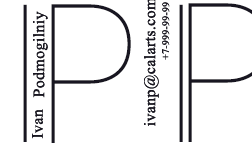
<style>
.page{position:relative;width:252px;height:144px;background:#ffffff}
.page>*{position:absolute;margin:0}
.t1{font:190px "ISOCT";letter-spacing:0.02em;color:#181621}
.t2{font:10px "TimesNewRomanPSMT";letter-spacing:0.02em;color:#181621}
.t3{font:16px "TimesNewRomanPSMT";letter-spacing:0.02em;color:#181621}
</style>
<div class="page">
<p class="t1" style="left:23px;top:4px;width:4px;height:138px">I</p>
<p class="t1" style="left:51px;top:4px;width:80px;height:139px">P</p>
<p class="t2" style="left:162px;top:2px;width:8px;height:58px;rotate:-90deg">+7-999-99-99</p>
<p class="t2" style="left:162px;top:2px;width:8px;height:58px;rotate:-90deg">+7-999-99-99</p>
<p class="t1" style="left:179px;top:4px;width:4px;height:138px">I</p>
<p class="t3" style="left:33px;top:11px;width:15px;height:87px;rotate:-90deg">Podmogilniy</p>
<p class="t3" style="left:33px;top:11px;width:15px;height:87px;rotate:-90deg">Podmogilniy</p>
<p class="t3" style="left:32px;top:109px;width:11px;height:30px;rotate:-90deg">Ivan</p>
<p class="t3" style="left:32px;top:109px;width:11px;height:30px;rotate:-90deg">Ivan</p>
</div>
